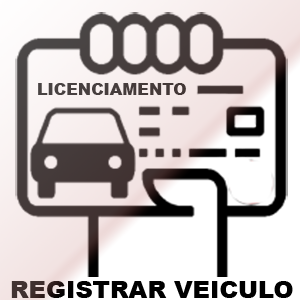
<style>
.page{position:relative;width:300px;height:300px;background:#ffffff}
.page>*{position:absolute;margin:0}
.t1{font:16px "Arial-Black";color:#463d3c}
.t2{font:24px "Arial-Black";color:#000000}
</style>
<div class="page">
<p class="t1" style="left:38px;top:83px;width:148px;height:12px">LICENCIAMENTO</p>
<p class="t2" style="left:11px;top:281px;width:282px;height:17px">REGISTRAR VEICULO</p>
</div>
